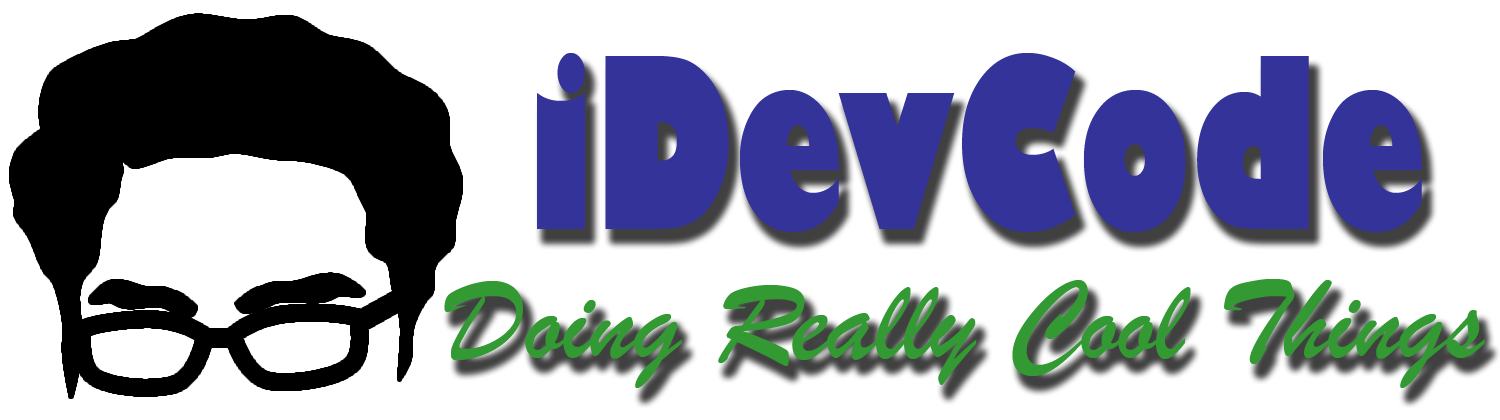
<style>
.page{position:relative;width:1500px;height:420px;background:#ffffff}
.page>*{position:absolute;margin:0}
.t1{font:232.2px "GillSans-UltraBoldCondensed";color:#333399}
.t2{font:120px "BrushScriptMT";color:#339933}
</style>
<div class="page">
<p class="t1" style="left:537px;top:53px;width:885px;height:179px">iDevCode</p>
<p class="t2" style="left:444px;top:279px;width:1041px;height:109px">Doing Really Cool Things</p>
</div>
